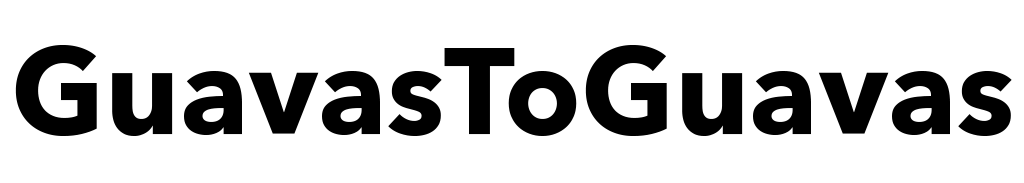
<style>
.page{position:relative;width:1024px;height:183px;background:#ffffff}
.page>*{position:absolute;margin:0}
.t1{font:122px "AvenirNext-Bold";color:#000000}
</style>
<div class="page">
<p class="t1" style="left:15px;top:45px;width:997px;height:91px">GuavasToGuavas</p>
</div>
